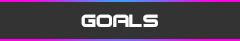
<style>
.page{position:relative;width:240px;height:41px;background:#333333}
.page>*{position:absolute;margin:0}
.t1{font:24px "Bitsumishi";color:#ffffff}
</style>
<div class="page">
<p class="t1" style="left:81px;top:14px;width:77px;height:13px">GOALS</p>
</div>
